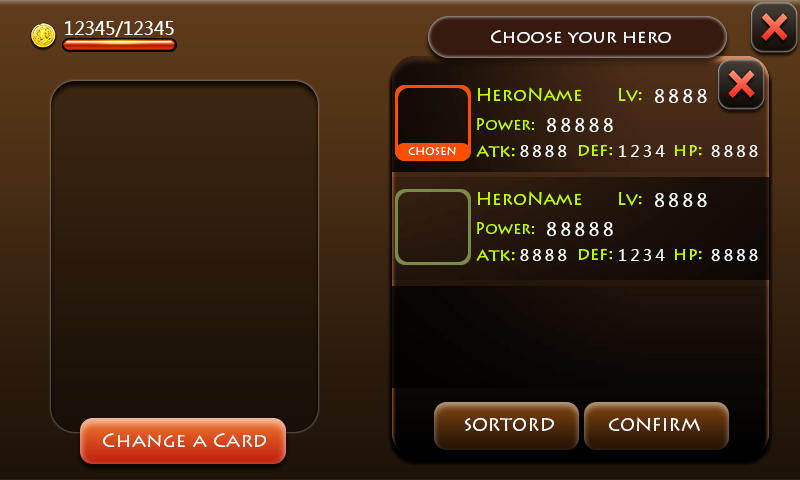
<style>
.page{position:relative;width:800px;height:480px}
.page>*{position:absolute;margin:0}
.t1{font:17.6px "MicrosoftYaHei";color:#ffffff}
.t2{font:18px "LithosPro-Regular";color:#ffffff}
.t3{font:18px "LithosPro-Regular";color:#c0ff00}
.t4{font:18px "MicrosoftYaHei";letter-spacing:0.2em;color:#ffffff}
.t5{font:16px "LithosPro-Regular";color:#c0ff00}
.t6{font:12px "LithosPro-Regular";color:#ffffff}
.t7{font:16px "MicrosoftYaHei";letter-spacing:0.2em;color:#ffffff}
.t8{font:18.9px "LithosPro-Regular";color:#ffffff;scale:1.07 1}
</style>
<div class="page">
<p class="t1" style="left:65px;top:21px;width:109px;height:16px">12345/12345</p>
<p class="t2" style="left:491px;top:30px;width:180px;height:13px">Choose your hero</p>
<p class="t3" style="left:478px;top:87px;width:104px;height:14px">HeroName</p>
<p class="t3" style="left:619px;top:88px;width:23px;height:14px">Lv:</p>
<p class="t4" style="left:655px;top:89px;width:52px;height:14px">8888</p>
<p class="t5" style="left:477px;top:118px;width:57px;height:13px">Power:</p>
<p class="t4" style="left:547px;top:118px;width:66px;height:14px">88888</p>
<p class="t6" style="left:408px;top:146px;width:48px;height:9px">chosen</p>
<p class="t3" style="left:476px;top:145px;width:39px;height:12px">atk:</p>
<p class="t7" style="left:520px;top:145px;width:47px;height:12px">8888</p>
<p class="t3" style="left:578px;top:144px;width:34px;height:12px">def:</p>
<p class="t7" style="left:619px;top:145px;width:46px;height:12px">1234</p>
<p class="t3" style="left:675px;top:145px;width:27px;height:11px">hp:</p>
<p class="t7" style="left:711px;top:145px;width:47px;height:12px">8888</p>
<p class="t3" style="left:478px;top:191px;width:104px;height:14px">HeroName</p>
<p class="t3" style="left:619px;top:192px;width:23px;height:14px">Lv:</p>
<p class="t4" style="left:655px;top:193px;width:52px;height:14px">8888</p>
<p class="t5" style="left:477px;top:222px;width:57px;height:13px">Power:</p>
<p class="t4" style="left:547px;top:222px;width:66px;height:14px">88888</p>
<p class="t3" style="left:476px;top:249px;width:39px;height:12px">atk:</p>
<p class="t7" style="left:520px;top:249px;width:47px;height:12px">8888</p>
<p class="t3" style="left:578px;top:248px;width:34px;height:12px">def:</p>
<p class="t7" style="left:619px;top:249px;width:46px;height:12px">1234</p>
<p class="t3" style="left:675px;top:249px;width:27px;height:11px">hp:</p>
<p class="t7" style="left:711px;top:249px;width:47px;height:12px">8888</p>
<p class="t2" style="left:465px;top:418px;width:89px;height:13px">SORTORD</p>
<p class="t2" style="left:609px;top:417px;width:91px;height:14px">CONFIRM</p>
<p class="t8" style="left:103px;top:433px;width:163px;height:14px">Change a Card</p>
</div>
